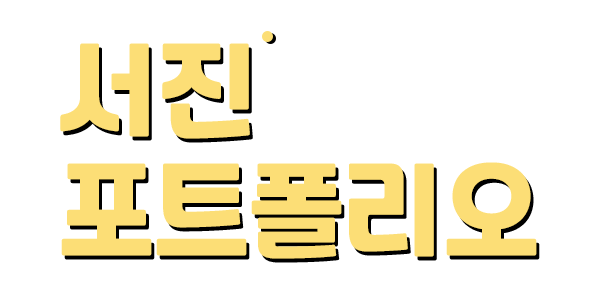
<style>
.page{position:relative;width:600px;height:300px;background:#ffffff}
.page>*{position:absolute;margin:0}
.t1{font:100px "RecipekoreaM";color:#fcde76}
</style>
<div class="page">
<p class="t1" style="left:60px;top:43px;width:477px;height:216px">서진<br>포트폴리오</p>
<p class="t1" style="left:63px;top:47px;width:477px;height:216px">서진<br>포트폴리오</p>
</div>
